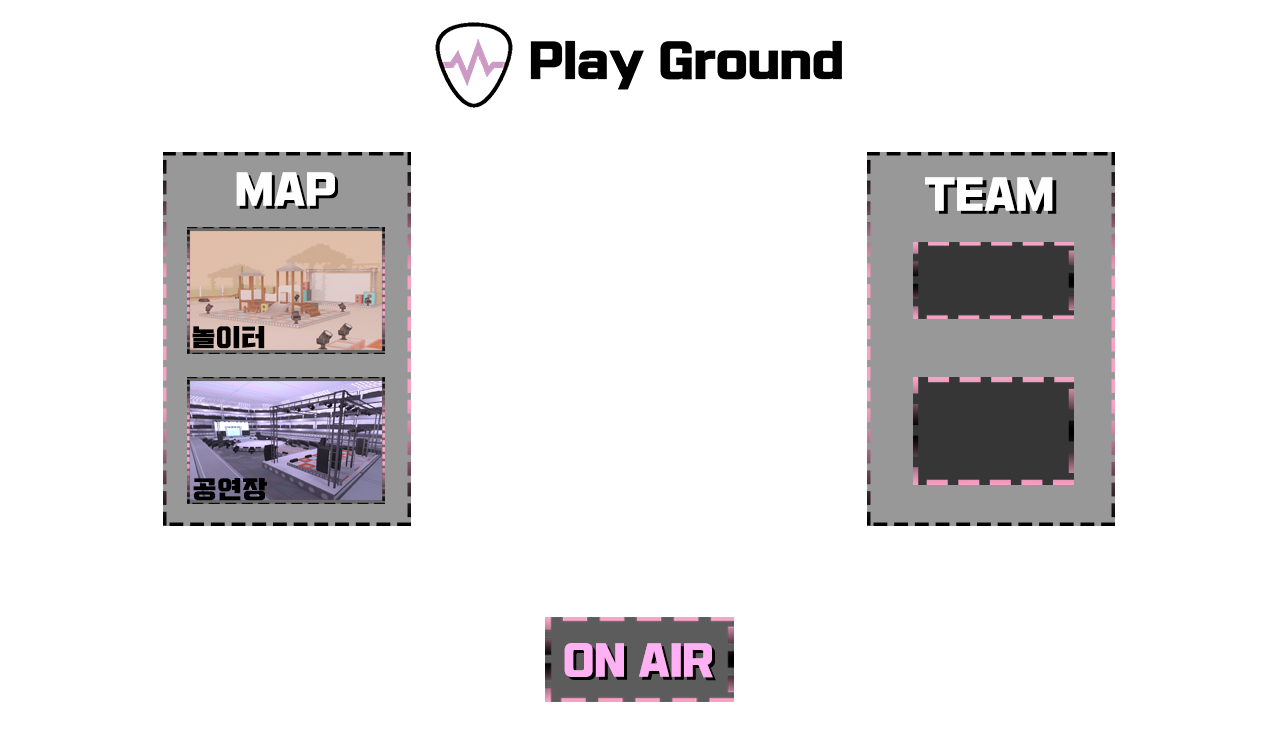
<style>
.page{position:relative;width:1280px;height:750px;background:#ffffff}
.page>*{position:absolute;margin:0}
.t1{font:41.7px "Typo_SsangmunDong_B";color:#fefefe}
.t2{font:25px "Typo_SsangmunDong_B";color:#000000}
.t3{font:41.7px "Typo_SsangmunDong_B";color:#ffb1f3}
</style>
<div class="page">
<p class="t1" style="left:236px;top:172px;width:99px;height:34px">MAP</p>
<p class="t1" style="left:925px;top:177px;width:128px;height:34px">TEAM</p>
<p class="t2" style="left:192px;top:326px;width:73px;height:23px">놀이터</p>
<p class="t2" style="left:193px;top:478px;width:74px;height:23px">공연장</p>
<p class="t3" style="left:564px;top:643px;width:149px;height:35px">ON AIR</p>
</div>
